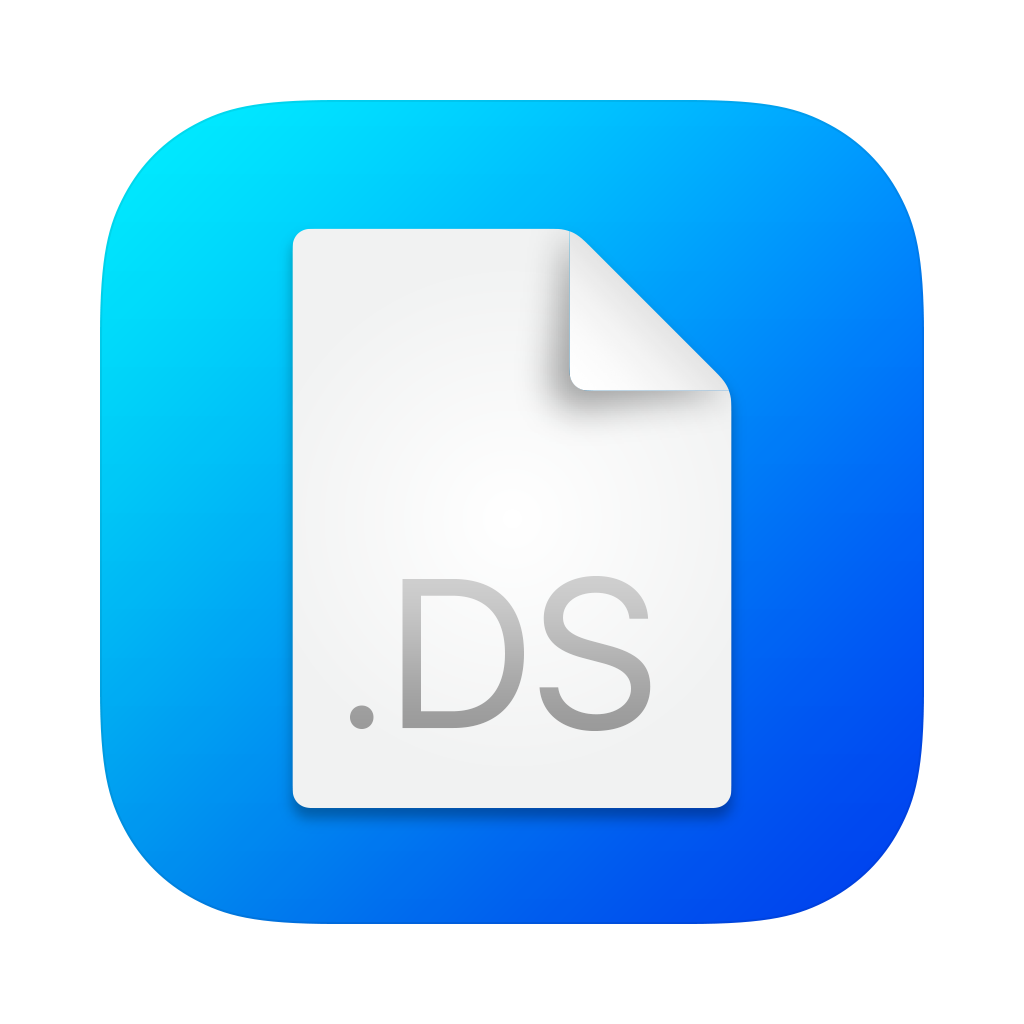
<style>
.page{position:relative;width:1024px;height:1024px;background:#ffffff}
.page>*{position:absolute;margin:0}
.t1{font:211.1px "SFUIDisplay-Regular"}
</style>
<div class="page">
<p class="t1" style="left:350px;top:576px;width:301px;height:155px">.DS</p>
</div>
